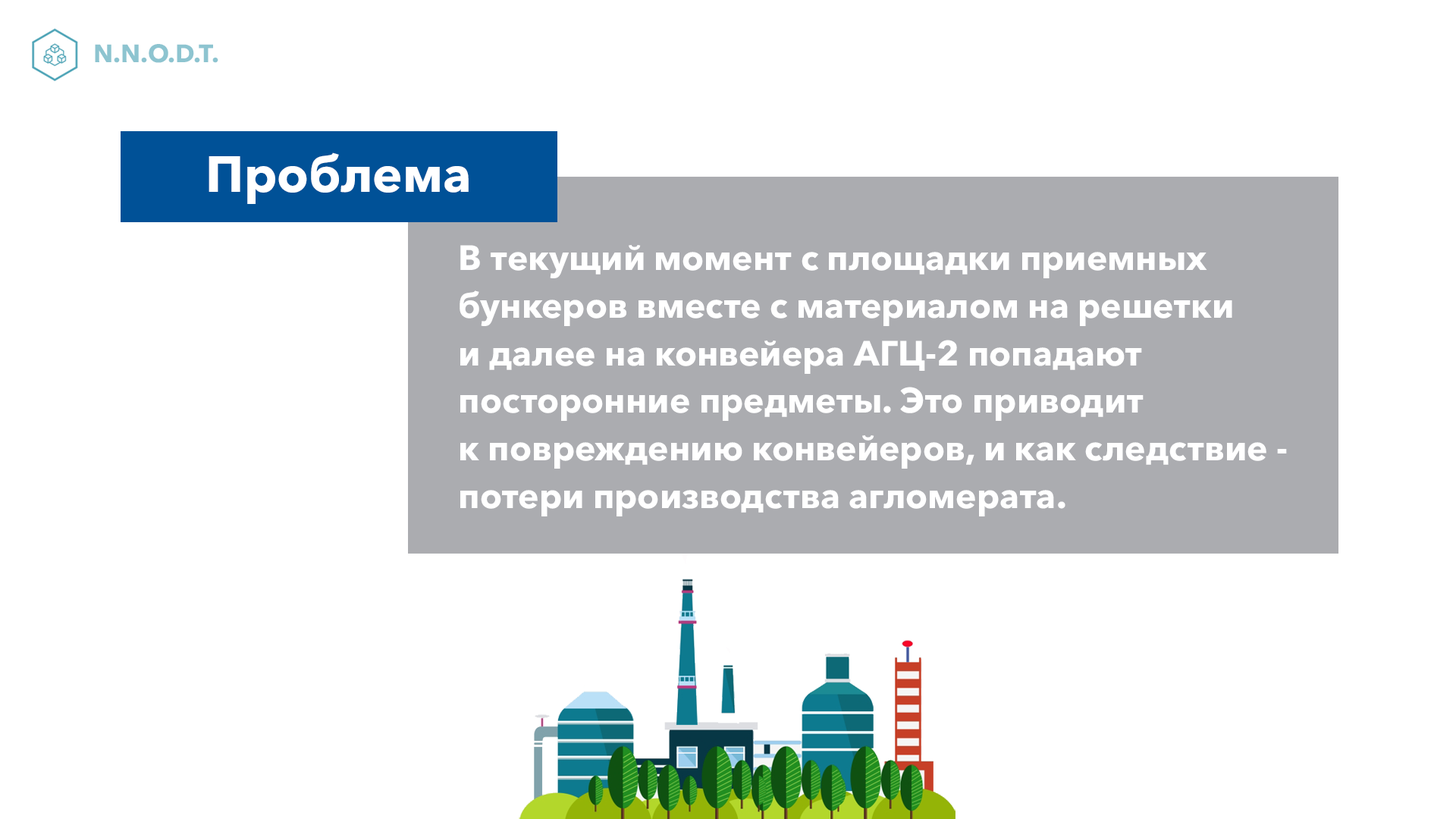
<style>
.page{position:relative;width:1456px;height:819px;background:#ffffff}
.page>*{position:absolute;margin:0}
.t1{font:25px "AvenirNextCyr-Bold";color:#8dc4d0}
.t2{font:50.2px "AvenirNextCyr-Bold";color:#ffffff}
.t3{font:34.9px/46.9px "AvenirNextCyr-Bold";color:#ffffff}
</style>
<div class="page">
<p class="t1" style="left:95px;top:44px;width:123px;height:19px">N.N.O.D.T.</p>
<p class="t2" style="left:209px;top:152px;width:260px;height:52px">Проблема</p>
<p class="t3" style="left:460px;top:245px;width:827px;height:271px">В текущий момент с площадки приемных<br>бункеров вместе с материалом на решетки<br>и далее на конвейера АГЦ-2 попадают<br>посторонние предметы. Это приводит<br>к повреждению конвейеров, и как следствие - <br>потери производства агломерата.</p>
</div>
